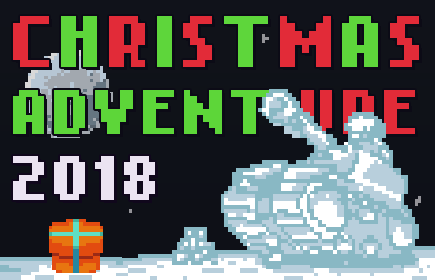
<style>
.page{position:relative;width:435px;height:280px}
.page>*{position:absolute;margin:0}
.t1{font:50px/66.7px "NokiaCellphoneFC-Small";letter-spacing:0.075em}
.t2{font:58.3px/66.7px "NokiaCellphoneFC-Small";letter-spacing:0.075em}
.t3{font:50px "NokiaCellphoneFC-Small";letter-spacing:0.075em;color:#ebe3f2}
.t4{font:58.3px "NokiaCellphoneFC-Small";letter-spacing:0.075em;color:#ebe3f2}
</style>
<div class="page">
<p class="t1" style="left:13px;top:16px;width:406px;height:184px"><span class="t2">C</span><span class="t2">H</span><span class="t2">R</span><span class="t2">I</span><span class="t2">S</span><span class="t2">T</span><span class="t2">M</span><span class="t2">A</span><span class="t2">S<br></span>ADVENT URE<br>2018</p>
<p class="t3" style="left:13px;top:156px;width:142px;height:44px"><span class="t4"><br><br></span>2018</p>
</div>
